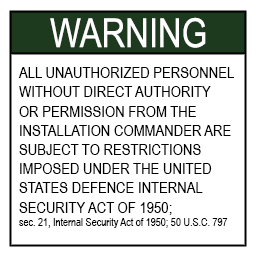
<style>
.page{position:relative;width:256px;height:256px;background:#ffffff}
.page>*{position:absolute;margin:0}
.t1{font:40px "ArialNarrow";color:#ffffff}
.t2{font:16px "ArialNarrow";color:#000000}
.t3{font:11px "ArialNarrow";color:#000000}
</style>
<div class="page">
<p class="t1" style="left:50px;top:17px;width:156px;height:31px">WARNING</p>
<p class="t2" style="left:18px;top:67px;width:216px;height:161px">ALL UNAUTHORIZED PERSONNEL<br>WITHOUT DIRECT AUTHORITY<br>OR PERMISSION FROM THE <br>INSTALLATION COMMANDER ARE <br>SUBJECT TO RESTRICTIONS<br>IMPOSED UNDER THE UNITED <br>STATES DEFENCE INTERNAL <br>SECURITY ACT OF 1950;<br><span class="t3">sec. 21, Internal Security Act of 1950; 50 U.S.C. 797</span></p>
</div>
